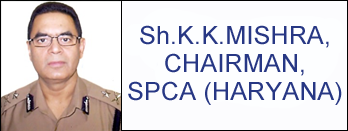
<style>
.page{position:relative;width:348px;height:131px;background:#fdfeff}
.page>*{position:absolute;margin:0}
.t1{font:25px/28px "ArialMT";letter-spacing:0.01em;color:#273784}
</style>
<div class="page">
<p class="t1" style="left:128px;top:25px;width:214px;height:80px;text-align:center">Sh.K.K.MISHRA,<br>CHAIRMAN,<br>SPCA (HARYANA)</p>
</div>
